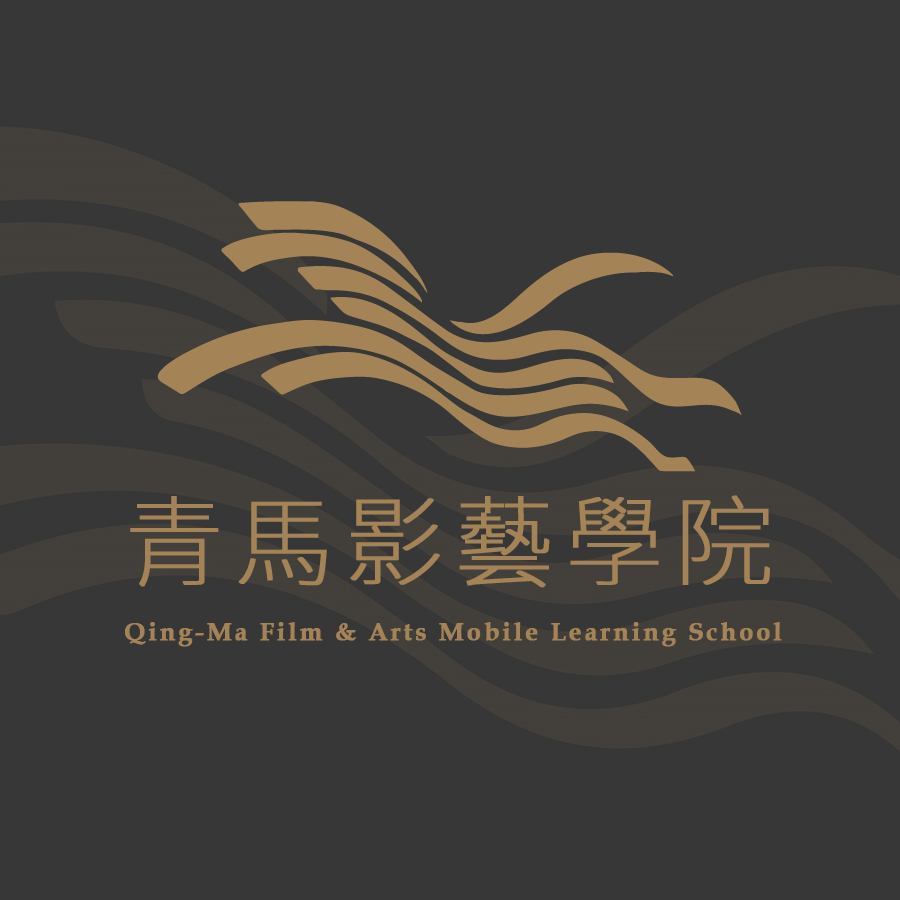
<style>
.page{position:relative;width:900px;height:900px;background:#373737}
.page>*{position:absolute;margin:0}
.t1{font:97.7px "NotoSansCJKtc-Thin";letter-spacing:0.1em;color:#a48357;font-weight:bold}
.t2{font:25px "BookAntiqua-Bold";letter-spacing:0.1em;color:#a48357;font-weight:bold}
</style>
<div class="page">
<p class="t1" style="left:130px;top:495px;width:640px;height:93px">青馬影藝學院</p>
<p class="t2" style="left:125px;top:622px;width:657px;height:25px">Qing-Ma Film &amp; Arts Mobile Learning School</p>
</div>
